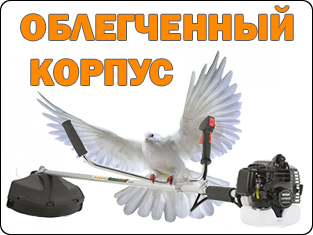
<style>
.page{position:relative;width:313px;height:235px;background:#ffffff}
.page>*{position:absolute;margin:0}
.t1{font:38px "FranklinGothic-Heavy";color:#ff8a00}
</style>
<div class="page">
<p class="t1" style="left:21px;top:6px;width:272px;height:80px;text-align:center">ОБЛЕГЧЕННЫЙ<br>КОРПУС</p>
</div>
